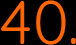
<style>
.page{position:relative;width:76px;height:45px;background:#000000}
.page>*{position:absolute;margin:0}
.t1{font:60px "Quicksand-Regular";color:#ff6600}
</style>
<div class="page">
<p class="t1" style="left:1px;top:0px;width:75px;height:45px">.40</p>
</div>
